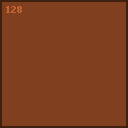
<style>
.page{position:relative;width:128px;height:128px;background:#804020}
.page>*{position:absolute;margin:0}
.t1{font:9px "Verdana-Bold";letter-spacing:-0.025em;color:#c66331;text-transform:uppercase}
</style>
<div class="page">
<p class="t1" style="left:6px;top:6px;width:16px;height:7px">128</p>
</div>
